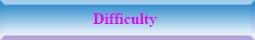
<style>
.page{position:relative;width:255px;height:40px}
.page>*{position:absolute;margin:0}
.t1{font:15.8px "TimesNewRomanPS-BoldMT";color:#d815ed}
</style>
<div class="page">
<p class="t1" style="left:93px;top:13px;width:64px;height:14px">Difficulty</p>
</div>
